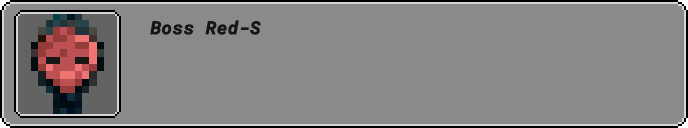
<style>
.page{position:relative;width:688px;height:128px;background:#8a8a8a}
.page>*{position:absolute;margin:0}
.t1{font:18px "RobotoMono-BoldItalic";color:#161616;font-weight:bold}
</style>
<div class="page">
<p class="t1" style="left:150px;top:20px;width:111px;height:15px">Boss Red-S</p>
</div>
